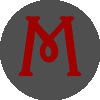
<style>
.page{position:relative;width:100px;height:100px;background:#4f4f4f}
.page>*{position:absolute;margin:0}
.t1{font:84px "Harrington";color:#9e0000;font-weight:bold}
</style>
<div class="page">
<p class="t1" style="left:18px;top:16px;width:64px;height:61px">M</p>
</div>
